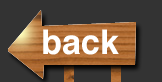
<style>
.page{position:relative;width:162px;height:82px;background:#333333}
.page>*{position:absolute;margin:0}
.t1{font:34.1px "Helvetica-Bold";color:#ffffff}
</style>
<div class="page">
<p class="t1" style="left:43px;top:29px;width:76px;height:26px">back</p>
</div>
